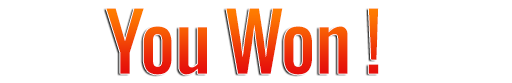
<style>
.page{position:relative;width:512px;height:83px;background:#ffffff}
.page>*{position:absolute;margin:0}
.t1{font:74.4px "Oswald-Regular"}
</style>
<div class="page">
<p class="t1" style="left:106px;top:8px;width:273px;height:67px">You Won !</p>
</div>
